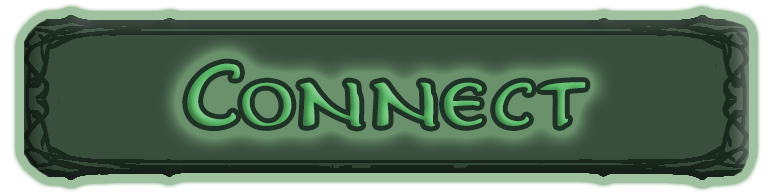
<style>
.page{position:relative;width:778px;height:195px;background:#394e3d}
.page>*{position:absolute;margin:0}
.t1{font:86.4px "MiddleEarth";color:#5bba69}
</style>
<div class="page">
<p class="t1" style="left:187px;top:63px;width:399px;height:64px">Connect</p>
</div>
